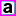
<style>
.page{position:relative;width:16px;height:16px;background:#ff00ff}
.page>*{position:absolute;margin:0}
.t1{font:17.8px "NewsGothicStd-Bold";color:#000000}
</style>
<div class="page">
<p class="t1" style="left:3px;top:3px;width:10px;height:10px">a</p>
</div>
